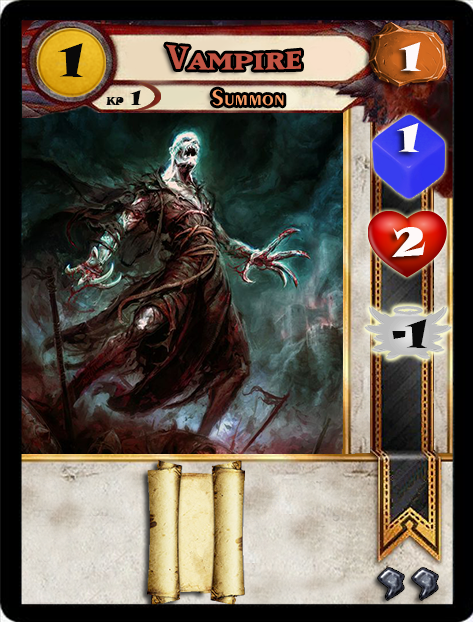
<style>
.page{position:relative;width:473px;height:622px}
.page>*{position:absolute;margin:0}
.t1{font:46.6px "SnapITC-Regular";color:#090909;scale:1.05 1}
.t2{font:40px "MatrixBoldSmallCaps";color:#c25443;scale:1.06 1}
.t3{font:40px "SnapITC-Regular";color:#fef9f9;scale:1.05 1}
.t4{font:22.7px "Exotic350BT-DemiBold";color:#f89c64;scale:1.06 1}
.t5{font:20.5px "SnapITC-Regular";color:#090909}
.t6{font:40px "SnapITC-Regular";color:#090909;scale:1.05 1}
</style>
<div class="page">
<p class="t1" style="left:58px;top:43px;width:25px;height:34px">1</p>
<p class="t2" style="left:166px;top:44px;width:135px;height:26px">Vampire</p>
<p class="t3" style="left:399px;top:42px;width:22px;height:29px">1</p>
<p class="t4" style="left:212px;top:89px;width:72px;height:17px">Summon</p>
<p class="t5" style="left:130px;top:90px;width:11px;height:15px">1</p>
<p class="t3" style="left:397px;top:123px;width:22px;height:29px">1</p>
<p class="t3" style="left:392px;top:227px;width:34px;height:30px">2</p>
<p class="t6" style="left:392px;top:319px;width:35px;height:29px">-1</p>
</div>
